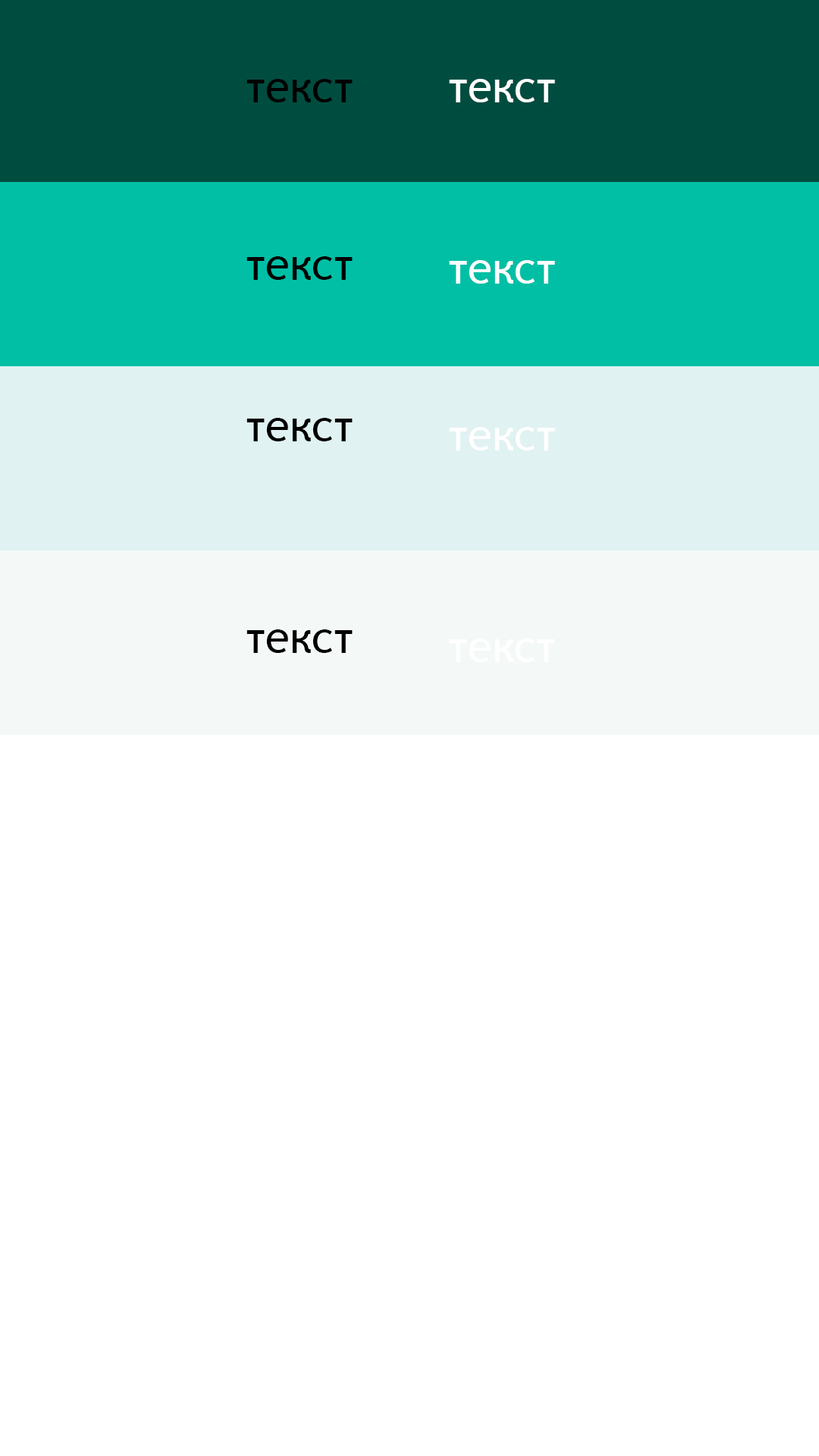
<style>
.page{position:relative;width:819px;height:1456px;background:#ffffff}
.page>*{position:absolute;margin:0}
.t1{font:43.6px "TrebuchetMS";color:#000000}
.t2{font:43.6px "TrebuchetMS";color:#ffffff}
</style>
<div class="page">
<p class="t1" style="left:246px;top:79px;width:107px;height:23px">текст</p>
<p class="t2" style="left:449px;top:79px;width:106px;height:23px">текст</p>
<p class="t1" style="left:246px;top:256px;width:107px;height:24px">текст</p>
<p class="t2" style="left:449px;top:260px;width:106px;height:24px">текст</p>
<p class="t1" style="left:246px;top:418px;width:107px;height:23px">текст</p>
<p class="t2" style="left:449px;top:427px;width:106px;height:23px">текст</p>
<p class="t1" style="left:246px;top:629px;width:107px;height:24px">текст</p>
<p class="t2" style="left:449px;top:639px;width:106px;height:23px">текст</p>
</div>
